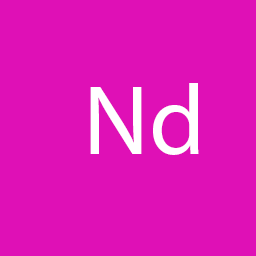
<style>
.page{position:relative;width:256px;height:256px;background:#df10b6}
.page>*{position:absolute;margin:0}
.t1{font:100px "MyriadPro-Regular";color:#ffffff}
</style>
<div class="page">
<p class="t1" style="left:90px;top:83px;width:109px;height:72px">Nd</p>
</div>
